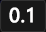
<style>
.page{position:relative;width:46px;height:32px;background:#181818}
.page>*{position:absolute;margin:0}
.t1{font:18.7px "MicrosoftYaHeiUI";color:#fffefe;font-weight:bold}
</style>
<div class="page">
<p class="t1" style="left:9px;top:7px;width:24px;height:16px">0.1</p>
</div>
